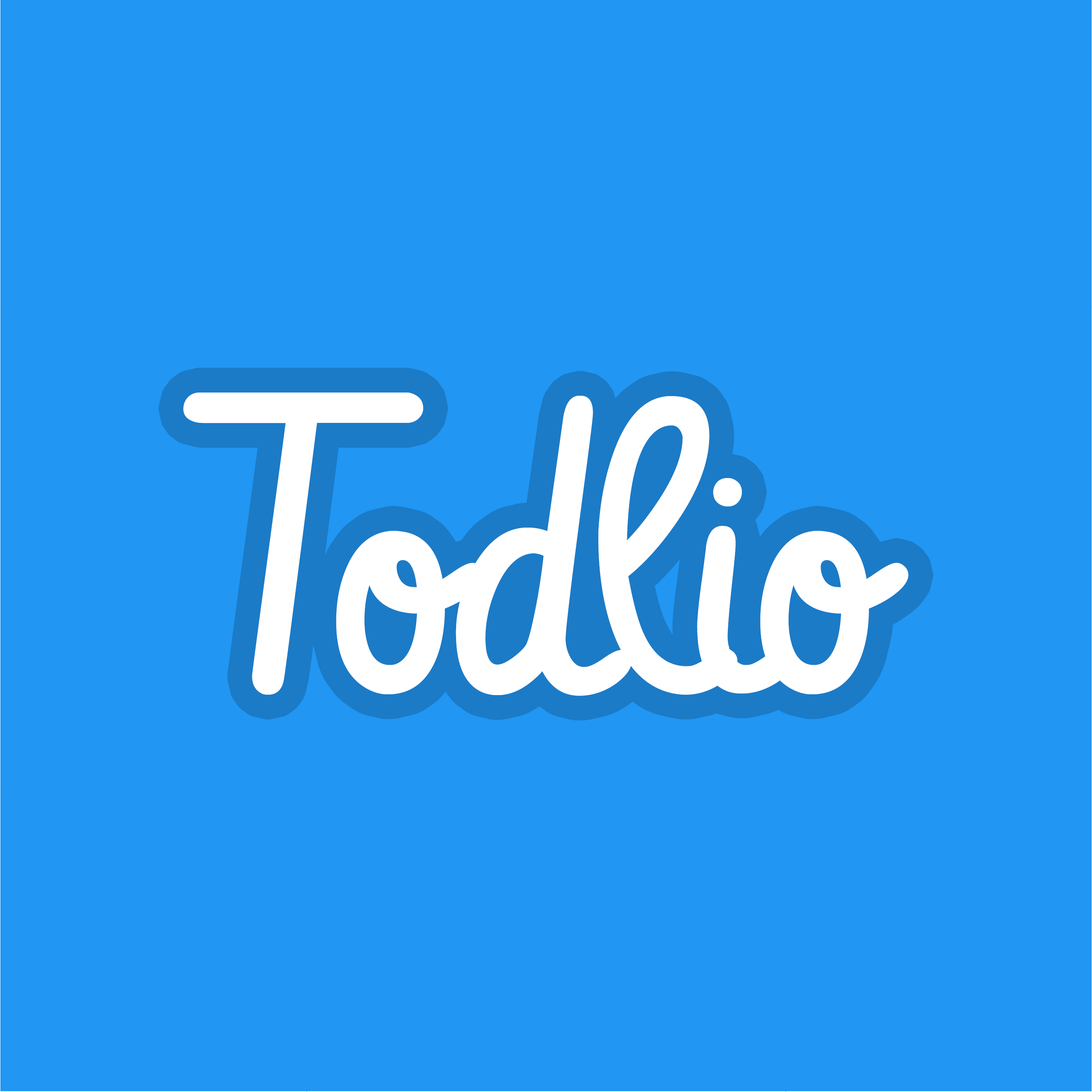
<style>
.page{position:relative;width:1092px;height:1092px;background:#2196f3}
.page>*{position:absolute;margin:0}
.t1{font:399.7px "Vibur";letter-spacing:-0.02em;color:#ffffff}
</style>
<div class="page">
<p class="t1" style="left:183px;top:393px;width:726px;height:303px">Todlio</p>
</div>
